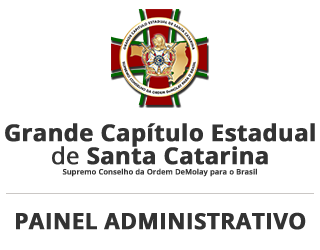
<style>
.page{position:relative;width:320px;height:250px;background:#ffffff}
.page>*{position:absolute;margin:0}
.t1{font:23.3px/22.9px "OpenSans-Bold";color:#333333;font-weight:bold}
.t2{font:23.3px/22.9px "OpenSans";color:#333333;font-weight:bold}
.t3{font:7.3px "OpenSans-Semibold";color:#333333;font-weight:bold}
.t4{font:22.3px "OpenSans-Bold";color:#333333;font-weight:bold}
</style>
<div class="page">
<p class="t1" style="left:5px;top:123px;width:310px;height:42px;text-align:center">Grande Capítulo Estadual<br><span class="t2">de </span>Santa Catarina</p>
<p class="t3" style="left:62px;top:168px;width:195px;height:9px">Supremo Conselho da Ordem DeMolay para o Brasil</p>
<p class="t4" style="left:16px;top:212px;width:290px;height:18px">PAINEL ADMINISTRATIVO</p>
</div>
